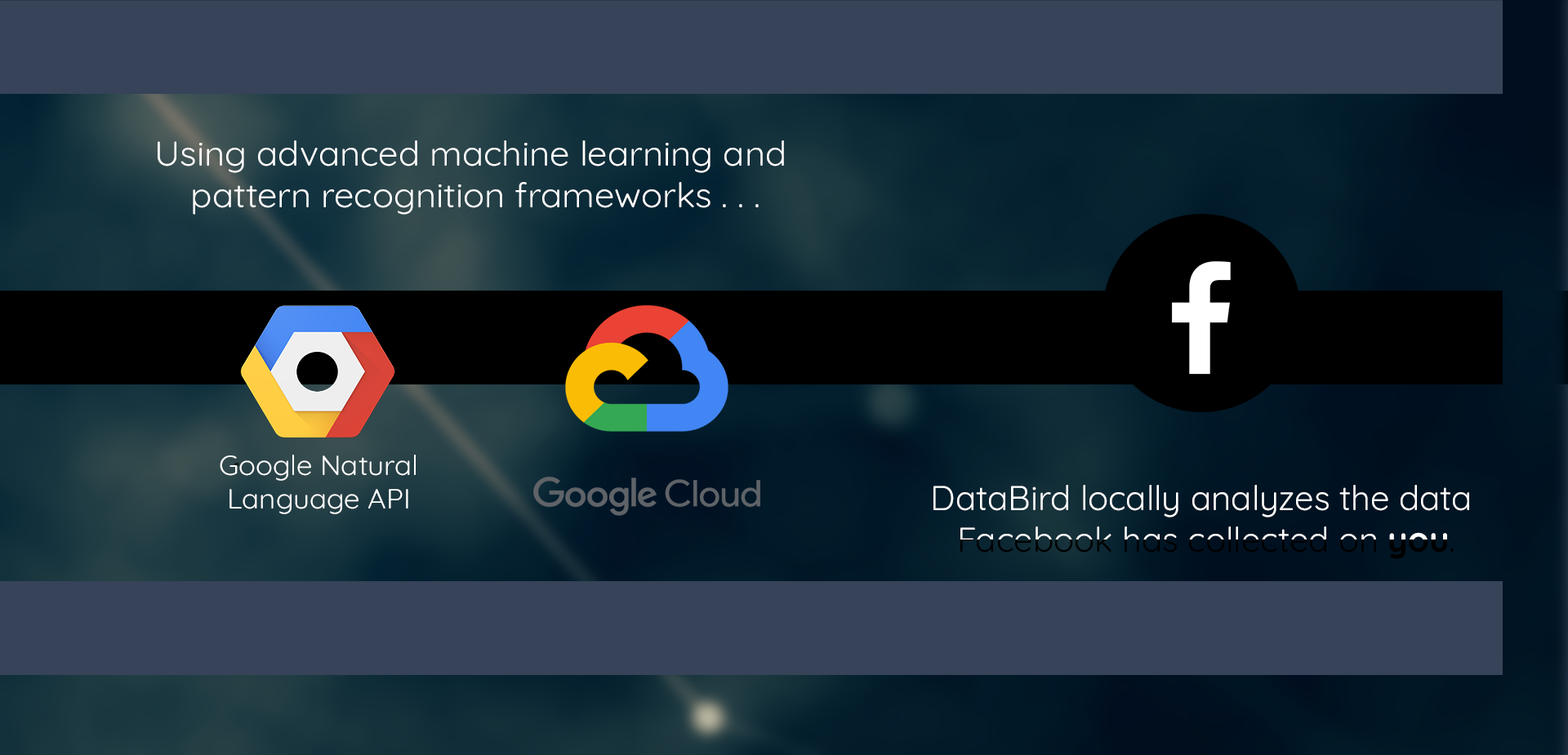
<style>
.page{position:relative;width:1568px;height:755px;background:#364359}
.page>*{position:absolute;margin:0}
.t1{font:34.3px "Quicksand-Regular";color:#ffffff;scale:1.04 1}
.t2{font:27.5px "Quicksand-Regular";color:#ffffff;scale:1.04 1}
.t3{font:34.3px "Quicksand-Regular";color:#ffffff}
.t4{font:34.3px "Quicksand-Bold";color:#ffffff}
</style>
<div class="page">
<p class="t1" style="left:158px;top:140px;width:626px;height:75px;text-align:center">Using advanced machine learning and <br>pattern recognition frameworks . . .</p>
<p class="t2" style="left:220px;top:455px;width:196px;height:59px;text-align:center">Google Natural<br>Language API</p>
<p class="t3" style="left:933px;top:485px;width:536px;height:74px;text-align:center">DataBird locally analyzes the data<br> Facebook has collected on <span class="t4">you</span>.</p>
</div>
